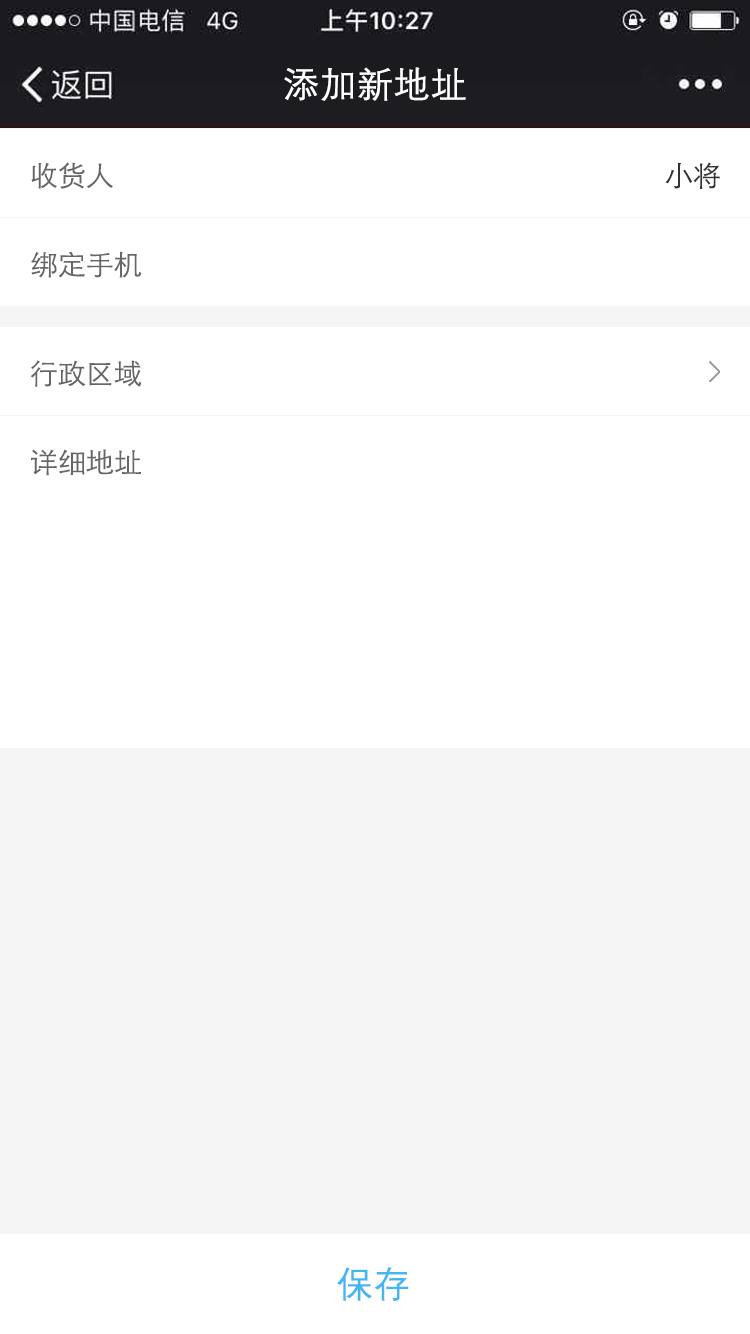
<style>
.page{position:relative;width:750px;height:1334px;background:#ffffff}
.page>*{position:absolute;margin:0}
.t1{font:36px "FZZDXJW--GB1-0";color:#ffffff;font-weight:bold}
.t2{font:28px "STXihei";color:#666666}
.t3{font:28px "STXihei";color:#333333}
.t4{font:36px "FZZDXJW--GB1-0";color:#43b6f2;font-weight:bold}
</style>
<div class="page">
<p class="t1" style="left:284px;top:67px;width:182px;height:34px">添加新地址</p>
<p class="t2" style="left:31px;top:162px;width:82px;height:27px">收货人</p>
<p class="t3" style="left:665px;top:162px;width:55px;height:27px">小将</p>
<p class="t2" style="left:31px;top:251px;width:111px;height:27px">绑定手机</p>
<p class="t2" style="left:30px;top:360px;width:112px;height:27px">行政区域</p>
<p class="t2" style="left:31px;top:449px;width:110px;height:27px">详细地址</p>
<p class="t4" style="left:337px;top:1267px;width:72px;height:34px">保存</p>
</div>
